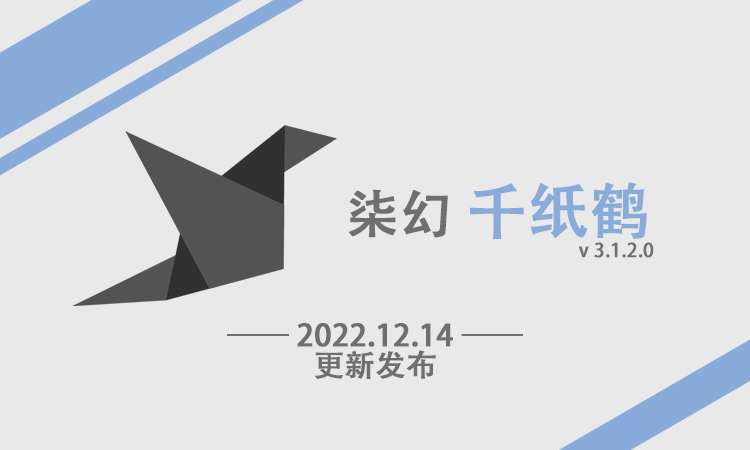
<style>
.page{position:relative;width:750px;height:450px;background:#e9e9e9}
.page>*{position:absolute;margin:0}
.t1{font:19px/60px "AdobeHeitiStd-Regular";color:#6f6f6f;font-weight:bold}
.t2{font:52px/60px "AdobeHeitiStd-Regular";color:#6f6f6f;font-weight:bold}
.t3{font:60px/60px "AdobeHeitiStd-Regular";color:#88abda;font-weight:bold}
.t4{font:30px/30px "AdobeHeitiStd-Regular";color:#6f6f6f;font-weight:bold}
</style>
<div class="page">
<p class="t1" style="left:349px;top:182px;width:305px;height:76px"><span class="t2">柒幻 </span><span class="t3">千纸鹤<br></span>v 3.1.2.0</p>
<p class="t4" style="left:227px;top:323px;width:296px;height:56px;text-align:center">—— 2022.12.14 ——<br>更新发布</p>
</div>
